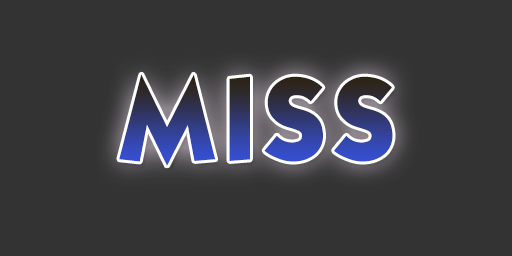
<style>
.page{position:relative;width:512px;height:256px;background:#333333}
.page>*{position:absolute;margin:0}
.t1{font:100px "KabelBdNormal"}
</style>
<div class="page">
<p class="t1" style="left:119px;top:74px;width:274px;height:92px">MISS</p>
</div>
